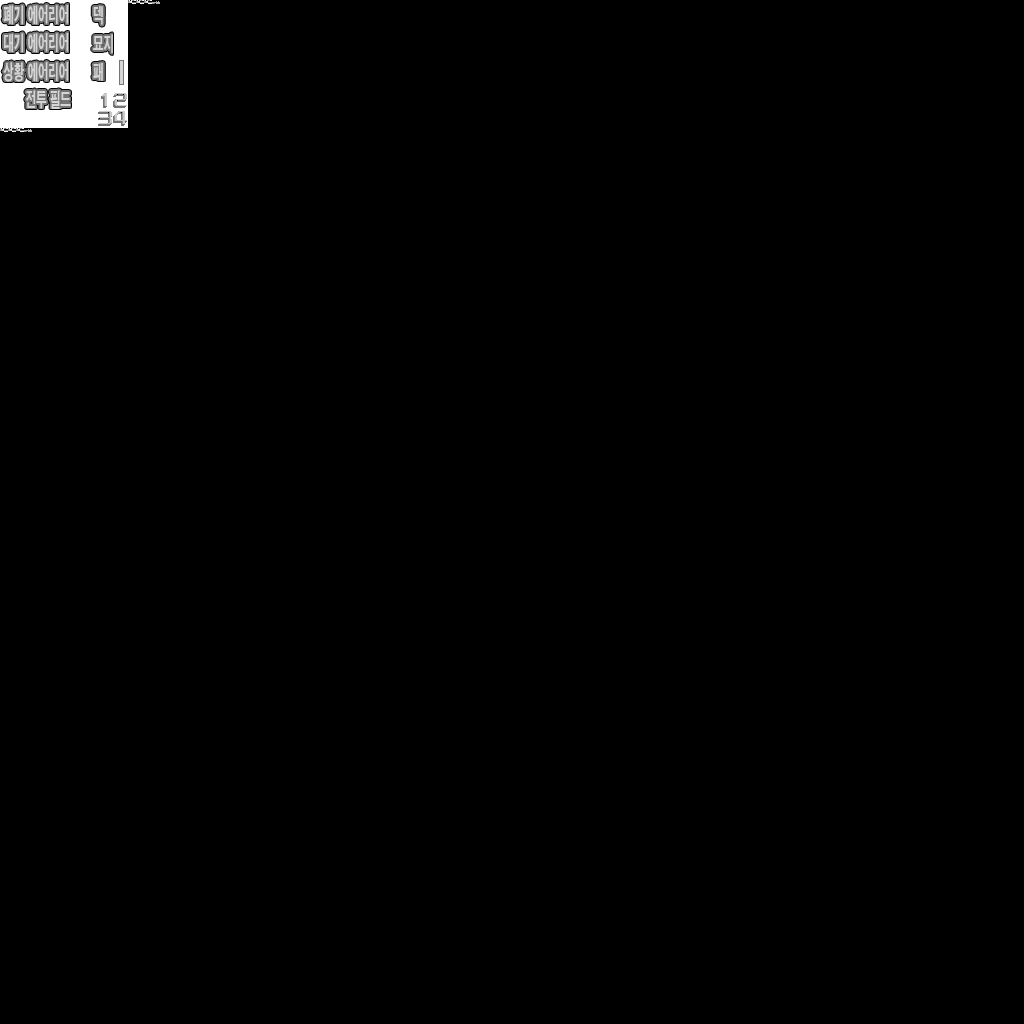
<style>
.page{position:relative;width:1024px;height:1024px;background:#000000}
.page>*{position:absolute;margin:0}
.t1{font:20px "H2gtrE";color:#d5d5d5;scale:0.52 1}
</style>
<div class="page">
<p class="t1" style="left:3px;top:5px;width:66px;height:20px">폐기 에어리어</p>
<p class="t1" style="left:4px;top:33px;width:65px;height:20px">대기 에어리어</p>
<p class="t1" style="left:3px;top:62px;width:66px;height:20px">상황 에어리어</p>
<p class="t1" style="left:26px;top:90px;width:45px;height:19px">전투 필드</p>
</div>
